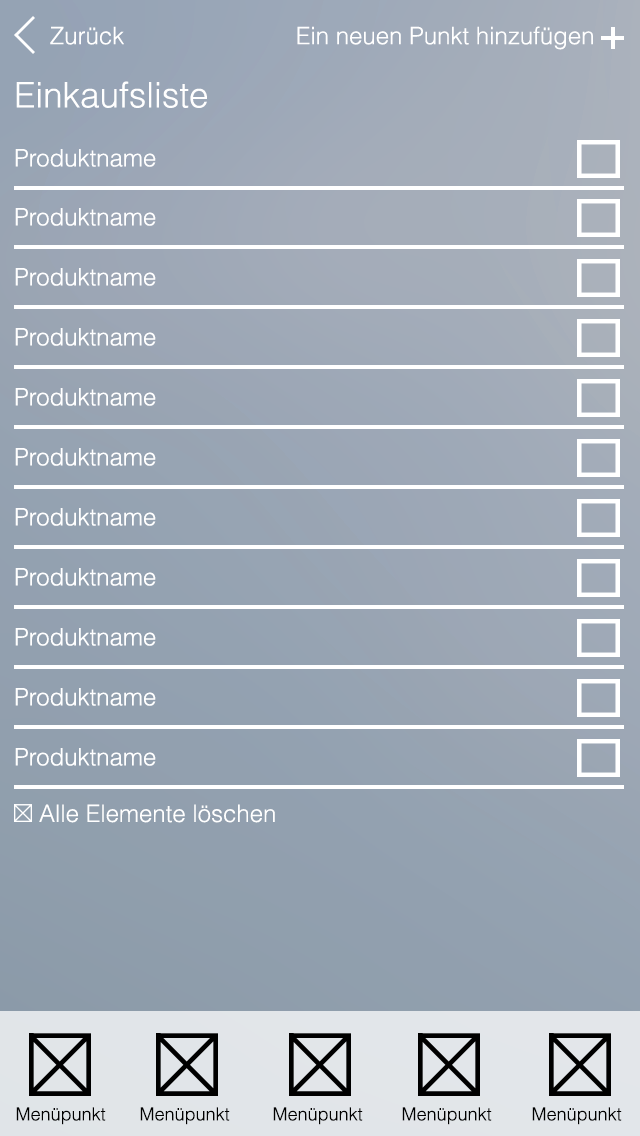
<style>
.page{position:relative;width:640px;height:1136px}
.page>*{position:absolute;margin:0}
.t1{font:24px "Helvetica-Light";color:#ffffff}
.t2{font:35px "Helvetica-Light";color:#ffffff}
.t3{font:18px "Helvetica-Light";color:#000000}
</style>
<div class="page">
<p class="t1" style="left:50px;top:26px;width:74px;height:19px">Zurück</p>
<p class="t1" style="left:297px;top:26px;width:296px;height:24px">Ein neuen Punkt hinzufügen</p>
<p class="t2" style="left:16px;top:81px;width:191px;height:27px">Einkaufsliste</p>
<p class="t1" style="left:15px;top:149px;width:141px;height:18px">Produktname</p>
<p class="t1" style="left:15px;top:208px;width:141px;height:18px">Produktname</p>
<p class="t1" style="left:15px;top:268px;width:141px;height:18px">Produktname</p>
<p class="t1" style="left:15px;top:328px;width:141px;height:18px">Produktname</p>
<p class="t1" style="left:15px;top:388px;width:141px;height:18px">Produktname</p>
<p class="t1" style="left:15px;top:448px;width:141px;height:18px">Produktname</p>
<p class="t1" style="left:15px;top:508px;width:141px;height:18px">Produktname</p>
<p class="t1" style="left:15px;top:568px;width:141px;height:18px">Produktname</p>
<p class="t1" style="left:15px;top:628px;width:141px;height:18px">Produktname</p>
<p class="t1" style="left:15px;top:688px;width:141px;height:18px">Produktname</p>
<p class="t1" style="left:15px;top:748px;width:141px;height:18px">Produktname</p>
<p class="t1" style="left:39px;top:804px;width:236px;height:19px">Alle Elemente löschen</p>
<p class="t3" style="left:16px;top:1107px;width:90px;height:18px">Menüpunkt</p>
<p class="t3" style="left:140px;top:1107px;width:90px;height:18px">Menüpunkt</p>
<p class="t3" style="left:273px;top:1107px;width:90px;height:18px">Menüpunkt</p>
<p class="t3" style="left:402px;top:1107px;width:90px;height:18px">Menüpunkt</p>
<p class="t3" style="left:532px;top:1107px;width:90px;height:18px">Menüpunkt</p>
</div>
